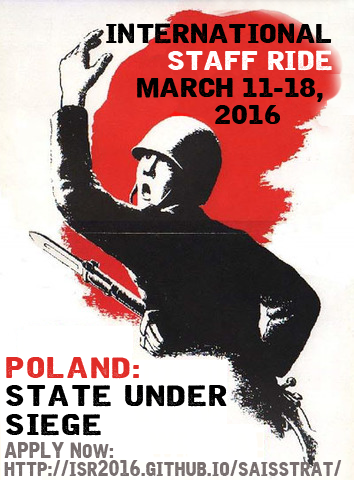
<style>
.page{position:relative;width:354px;height:480px}
.page>*{position:absolute;margin:0}
.t1{font:26.9px/26.9px "Iron&Brine";color:#000000;scale:1.25 1}
.t2{font:26.9px/26.9px "Iron&Brine";color:#fffefe;scale:1.25 1}
.t3{font:28.8px/28.8px "Iron&Brine";letter-spacing:0.025em;color:#000000;scale:1.3 1}
.t4{font:28.8px/28.8px "MBSlavonicMinsk";letter-spacing:0.02em;color:#000000;scale:1.25 1}
.t5{font:28.8px/28.8px "Iron&Brine";letter-spacing:0.025em;color:#e02d28;scale:1.3 1}
.t6{font:21.9px/18px "Iron&Brine";color:#786f6f}
</style>
<div class="page">
<p class="t1" style="left:106px;top:23px;width:226px;height:101px;text-align:right">INTERNATIONAL<br><span class="t2">STAFF RIDE<br></span>MARCH 11-18, <br>2016</p>
<p class="t3" style="left:6px;top:357px;width:221px;height:79px"><span class="t4"><br></span><span class="t5">POLAND: <br></span>STATE UNDER<br>SIEGE</p>
<p class="t6" style="left:4px;top:442px;width:338px;height:34px">APPLY Now:<br>http://isr2016.github.io/saisstrat/</p>
</div>
